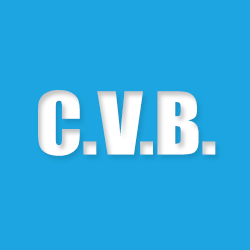
<style>
.page{position:relative;width:250px;height:250px;background:#1ca5e0}
.page>*{position:absolute;margin:0}
.t1{font:79.9px "Impact";letter-spacing:-0.005em;color:#fdfdfd;scale:1.07 1}
</style>
<div class="page">
<p class="t1" style="left:38px;top:90px;width:178px;height:66px">C.V.B.</p>
</div>
